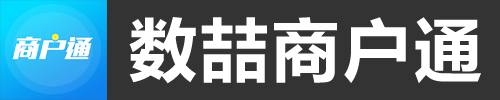
<style>
.page{position:relative;width:500px;height:100px;background:#333333}
.page>*{position:absolute;margin:0}
.t1{font:67.9px "MicrosoftYaHei-Bold";letter-spacing:0.05em;color:#ffffff}
</style>
<div class="page">
<p class="t1" style="left:129px;top:17px;width:352px;height:67px">数喆商户通</p>
</div>
